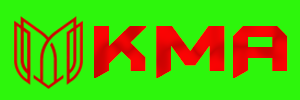
<style>
.page{position:relative;width:300px;height:100px;background:#2df60c}
.page>*{position:absolute;margin:0}
.t1{font:72.6px "BatmanForeverAlternate";color:#ec0403;font-weight:bold}
</style>
<div class="page">
<p class="t1" style="left:94px;top:26px;width:194px;height:52px">KMA</p>
</div>
